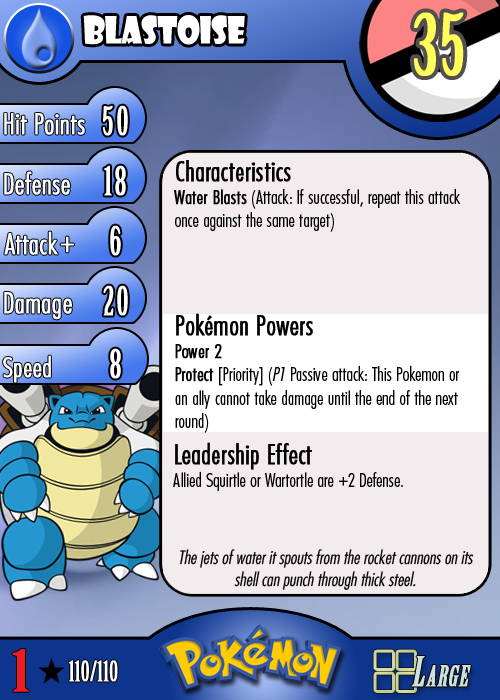
<style>
.page{position:relative;width:500px;height:700px;background:#f2ecee}
.page>*{position:absolute;margin:0}
.t1{font:36.7px "ShowcardGothic-Reg";letter-spacing:-0.025em;color:#ffffff;scale:0.91 1}
.t2{font:83.3px "BirchStd";letter-spacing:0.025em;color:#fffd59;font-weight:bold}
.t3{font:27.8px "Futura-CondensedLight";color:#ffffff;font-weight:bold}
.t4{font:38.9px "BirchStd";letter-spacing:0.035em;color:#ffffff;font-weight:bold}
.t5{font:19.4px "FuturaCondensedBQ-Light";color:#010101}
.t6{font:27.8px "FuturaCondensedBQ-Light";color:#010101;font-weight:bold}
.t7{font:19.4px "FuturaCondensedBQ-Light";color:#010101;font-weight:bold}
.t8{font:30.6px "Futura-CondensedLight";color:#ffffff;font-weight:bold}
.t9{font:19.4px "FuturaCondensedBQ-Light";color:#010101;font-style:italic}
.t10{font:27.8px "FuturaCondensedBQ-Light";color:#ffffff;font-weight:bold}
.t11{font:18.1px "Futura-CondensedLight";color:#010101;font-style:italic}
.t12{font:55.6px "BirchStd";color:#ed1c24;font-weight:bold;scale:1.5 1}
.t13{font:27.8px "BirchStd";color:#ffffff;font-weight:bold}
</style>
<div class="page">
<p class="t1" style="left:83px;top:15px;width:162px;height:30px">blastoise</p>
<p class="t2" style="left:414px;top:12px;width:50px;height:64px">35</p>
<p class="t3" style="left:4px;top:113px;width:81px;height:22px">Hit Points</p>
<p class="t4" style="left:103px;top:105px;width:25px;height:31px">50</p>
<p class="t5" style="left:174px;top:160px;width:287px;height:72px"><span class="t6">Characteristics<br></span><span class="t7">Water Blasts</span> (Attack: If successful, repeat this attack once against the same target)</p>
<p class="t3" style="left:4px;top:171px;width:66px;height:24px">Defense</p>
<p class="t4" style="left:104px;top:165px;width:22px;height:31px">18</p>
<p class="t3" style="left:4px;top:231px;width:54px;height:24px">Attack</p>
<p class="t4" style="left:110px;top:225px;width:11px;height:31px">6</p>
<p class="t8" style="left:60px;top:236px;width:14px;height:17px">+</p>
<p class="t3" style="left:4px;top:292px;width:68px;height:28px">Damage</p>
<p class="t4" style="left:103px;top:285px;width:25px;height:31px">20</p>
<p class="t5" style="left:175px;top:313px;width:284px;height:120px"><span class="t6">Pokémon Powers<br></span><span class="t7">Power 2<br>Protect</span> [Priority] (<span class="t9">P1 </span>Passive attack: This Pokemon or an ally cannot take damage until the end of the next round)</p>
<p class="t4" style="left:110px;top:348px;width:11px;height:31px">8</p>
<p class="t10" style="left:3px;top:355px;width:48px;height:28px">Speed</p>
<p class="t5" style="left:173px;top:442px;width:230px;height:49px"><span class="t6">Leadership Effect<br></span>Allied Squirtle or Wartortle are +2 Defense.</p>
<p class="t11" style="left:180px;top:549px;width:294px;height:41px;text-align:center">The jets of water it spouts from the rocket cannons on its shell can punch through thick steel.</p>
<p class="t12" style="left:12px;top:649px;width:17px;height:43px">1</p>
<p class="t13" style="left:68px;top:660px;width:50px;height:22px">110/110</p>
</div>
